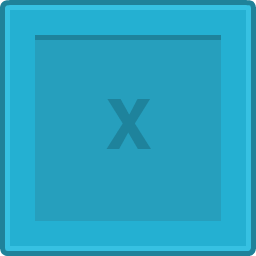
<style>
.page{position:relative;width:256px;height:256px;background:#269fbd}
.page>*{position:absolute;margin:0}
.t1{font:72px "KohinoorDevanagari-Bold";color:#1e839c}
</style>
<div class="page">
<p class="t1" style="left:106px;top:99px;width:45px;height:50px">X</p>
</div>
